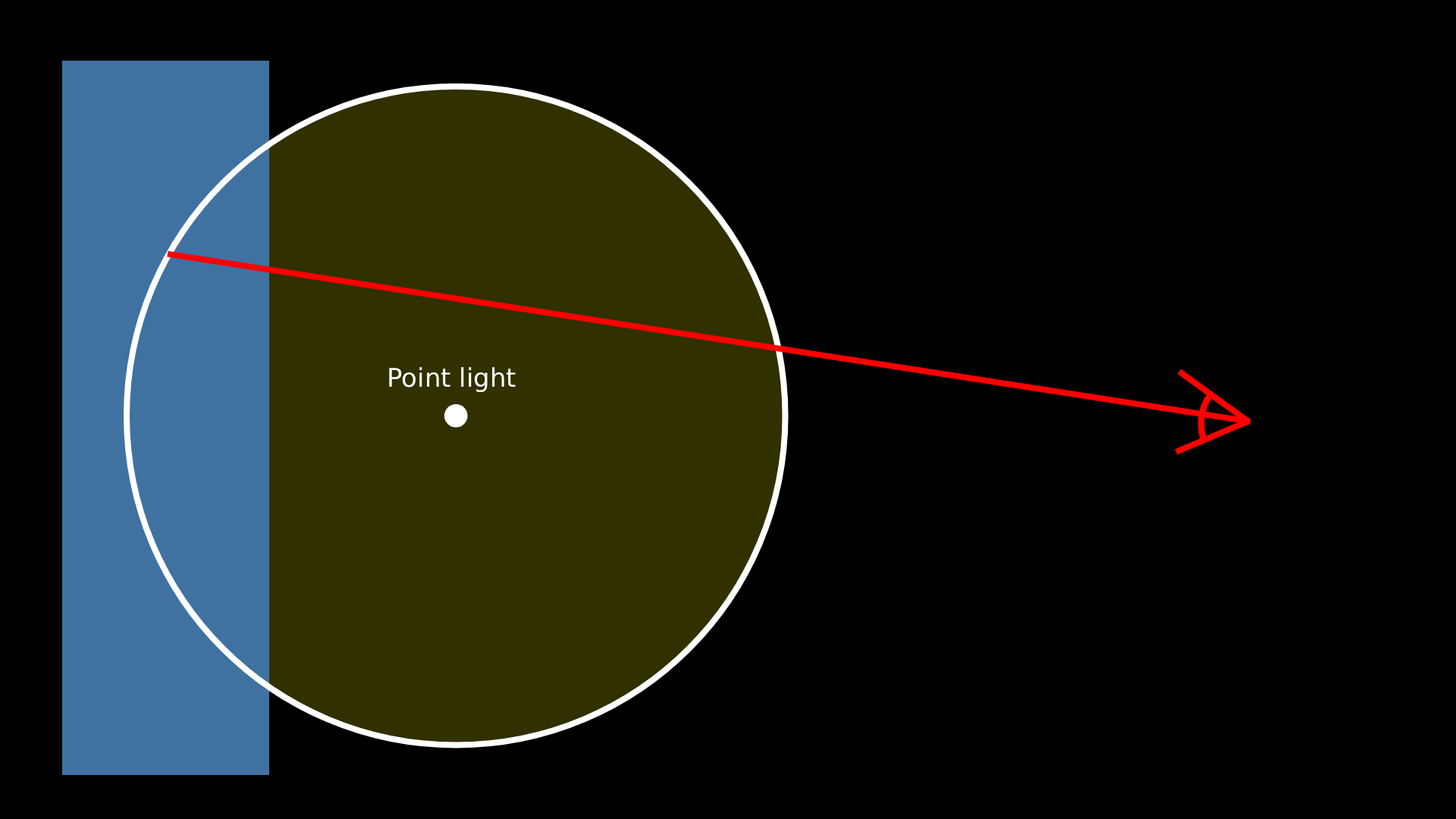
<style>
.page{position:relative;width:1456px;height:819px;background:#000000}
.page>*{position:absolute;margin:0}
.t1{font:25.8px "DejaVuSans";color:#ffffff}
</style>
<div class="page">
<p class="t1" style="left:389px;top:367px;width:127px;height:26px">Point light</p>
</div>
